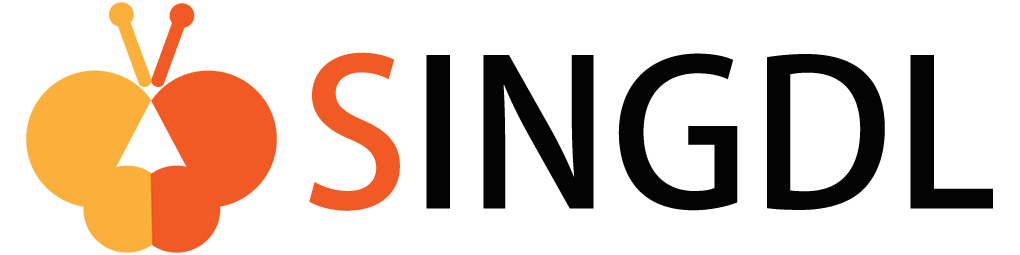
<style>
.page{position:relative;width:1020px;height:255px;background:#ffffff}
.page>*{position:absolute;margin:0}
.t1{font:200px "AdobeHeitiStd-Regular";letter-spacing:0.01em;color:#030303}
.t2{font:200px "AdobeHeitiStd-Regular";letter-spacing:0.01em;color:#f15a24}
</style>
<div class="page">
<p class="t1" style="left:309px;top:52px;width:684px;height:159px"><span class="t2">S</span>INGDL</p>
</div>
